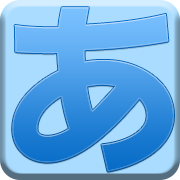
<style>
.page{position:relative;width:180px;height:180px;background:#a9dcff}
.page>*{position:absolute;margin:0}
.t1{font:185.4px "DFPOP1-W12-WING-RKSJ-H"}
</style>
<div class="page">
<p class="t1" style="left:12px;top:7px;width:162px;height:165px">あ</p>
</div>
